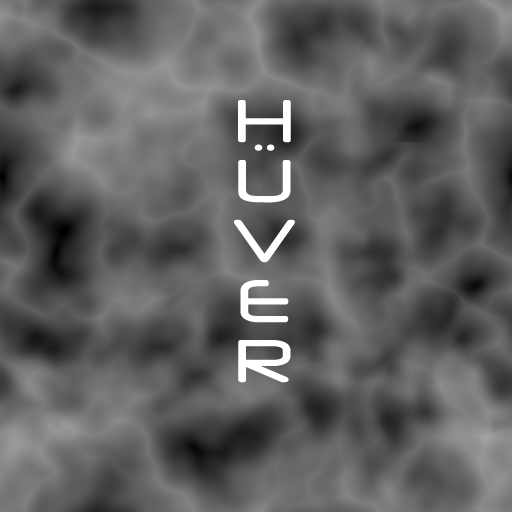
<style>
.page{position:relative;width:512px;height:512px}
.page>*{position:absolute;margin:0}
.t1{font:71.2px/60px "Neuropol";color:#ffffff}
</style>
<div class="page">
<p class="t1" style="left:234px;top:100px;width:61px;height:283px;text-align:center">H<br>Ü<br>V<br>E<br>R</p>
</div>
